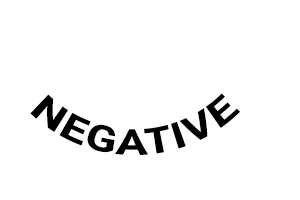
<style>
.page{position:relative;width:300px;height:200px;background:#ffffff}
.page>*{position:absolute;margin:0}
.t1{font:36px "Roboto-Bold";color:#000000}
</style>
<div class="page">
<p class="t1" style="left:30px;top:93px;width:210px;height:62px">NEGATIVE</p>
</div>
